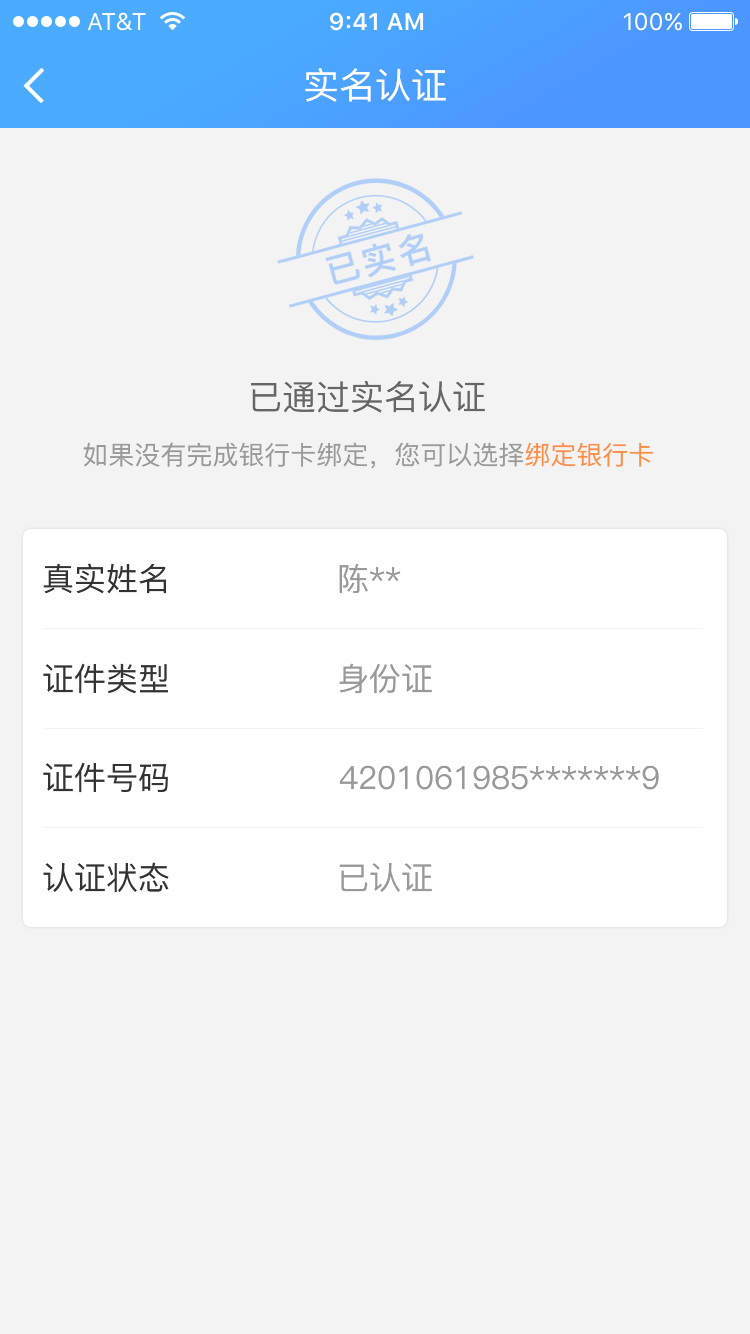
<style>
.page{position:relative;width:750px;height:1334px;background:#f3f3f3}
.page>*{position:absolute;margin:0}
.t1{font:36px "PingFang-SC-Medium";color:#ffffff}
.t2{font:34px "PingFang-SC-Medium";color:#666666}
.t3{font:26px "PingFang-SC-Medium";color:#999999}
.t4{font:26px "PingFang-SC-Medium";color:#ff8e42}
.t5{font:32px "PingFang-SC-Medium";color:#333333}
.t6{font:32px "PingFang-SC-Medium";color:#999999}
</style>
<div class="page">
<p class="t1" style="left:305px;top:68px;width:141px;height:34px">实名认证</p>
<p class="t2" style="left:251px;top:381px;width:234px;height:32px">已通过实名认证</p>
<p class="t3" style="left:83px;top:442px;width:570px;height:27px">如果没有完成银行卡绑定，您可以选择<span class="t4">绑定银行卡</span></p>
<p class="t5" style="left:43px;top:563px;width:123px;height:31px">真实姓名</p>
<p class="t6" style="left:339px;top:563px;width:62px;height:31px">陈**</p>
<p class="t5" style="left:43px;top:663px;width:125px;height:31px">证件类型</p>
<p class="t6" style="left:339px;top:663px;width:93px;height:31px">身份证</p>
<p class="t5" style="left:43px;top:762px;width:125px;height:31px">证件号码</p>
<p class="t6" style="left:339px;top:765px;width:320px;height:25px">4201061985*******9</p>
<p class="t5" style="left:43px;top:862px;width:126px;height:31px">认证状态</p>
<p class="t6" style="left:339px;top:863px;width:93px;height:29px">已认证</p>
</div>
